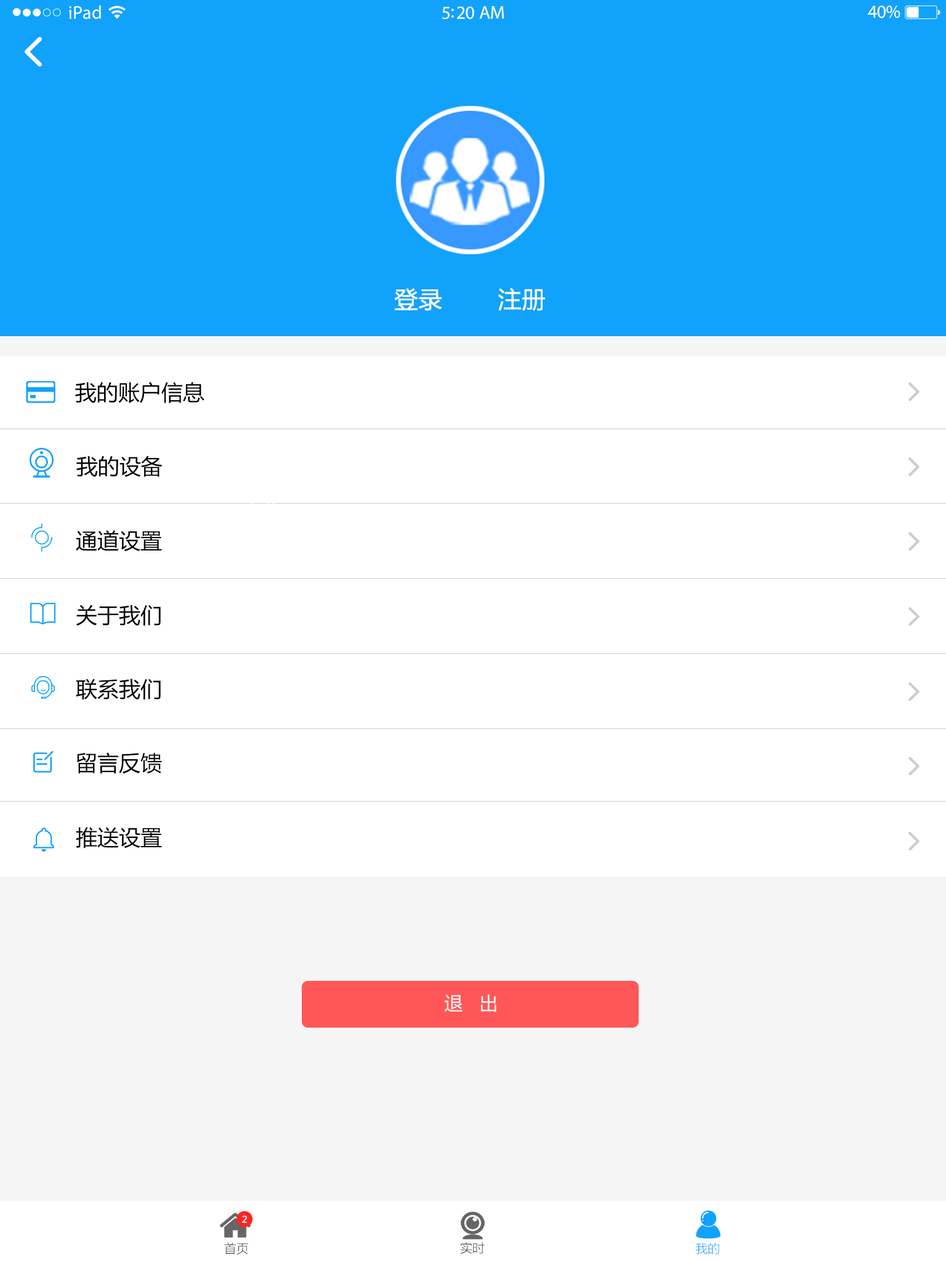
<style>
.page{position:relative;width:946px;height:1261px;background:#ffffff}
.page>*{position:absolute;margin:0}
.t1{font:18.5px "MyriadPro-Regular";letter-spacing:0.02em;color:#ffffff}
.t2{font:18.5px "MyriadPro-Regular";letter-spacing:-0.02em;color:#ffffff}
.t3{font:23.4px "MicrosoftYaHei";color:#ffffff;font-weight:bold}
.t4{font:21.5px "MicrosoftYaHei";color:#000000}
.t5{font:18.5px "MicrosoftYaHei";color:#ffffff}
.t6{font:9.1px "MicrosoftYaHei";color:#ffffff;font-weight:bold}
.t7{font:12.3px "MicrosoftYaHeiLight";color:#333333}
.t8{font:12.3px "MicrosoftYaHeiLight";color:#11a2fb}
</style>
<div class="page">
<p class="t1" style="left:69px;top:5px;width:32px;height:14px">iPad</p>
<p class="t2" style="left:867px;top:6px;width:33px;height:12px">40%</p>
<p class="t2" style="left:442px;top:6px;width:62px;height:13px">5:20 AM</p>
<p class="t3" style="left:394px;top:288px;width:48px;height:23px">登录</p>
<p class="t3" style="left:497px;top:288px;width:48px;height:23px">注册</p>
<p class="t4" style="left:75px;top:382px;width:129px;height:21px">我的账户信息</p>
<p class="t4" style="left:76px;top:456px;width:87px;height:21px">我的设备</p>
<p class="t4" style="left:76px;top:530px;width:86px;height:22px">通道设置</p>
<p class="t4" style="left:76px;top:605px;width:85px;height:21px">关于我们</p>
<p class="t4" style="left:76px;top:678px;width:85px;height:21px">联系我们</p>
<p class="t4" style="left:76px;top:752px;width:86px;height:22px">留言反馈</p>
<p class="t4" style="left:76px;top:827px;width:86px;height:21px">推送设置</p>
<p class="t5" style="left:445px;top:994px;width:51px;height:18px">退   出</p>
<p class="t6" style="left:242px;top:1215px;width:5px;height:8px">2</p>
<p class="t7" style="left:460px;top:1242px;width:25px;height:12px">实时</p>
<p class="t7" style="left:224px;top:1242px;width:24px;height:13px">首页</p>
<p class="t8" style="left:695px;top:1242px;width:24px;height:12px">我的</p>
</div>
